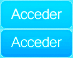
<style>
.page{position:relative;width:73px;height:58px}
.page>*{position:absolute;margin:0}
.t1{font:13.9px "Kartika";letter-spacing:-0.025em;color:#f8fbfa}
</style>
<div class="page">
<p class="t1" style="left:11px;top:8px;width:51px;height:12px">Acceder</p>
<p class="t1" style="left:11px;top:36px;width:51px;height:12px">Acceder</p>
</div>
